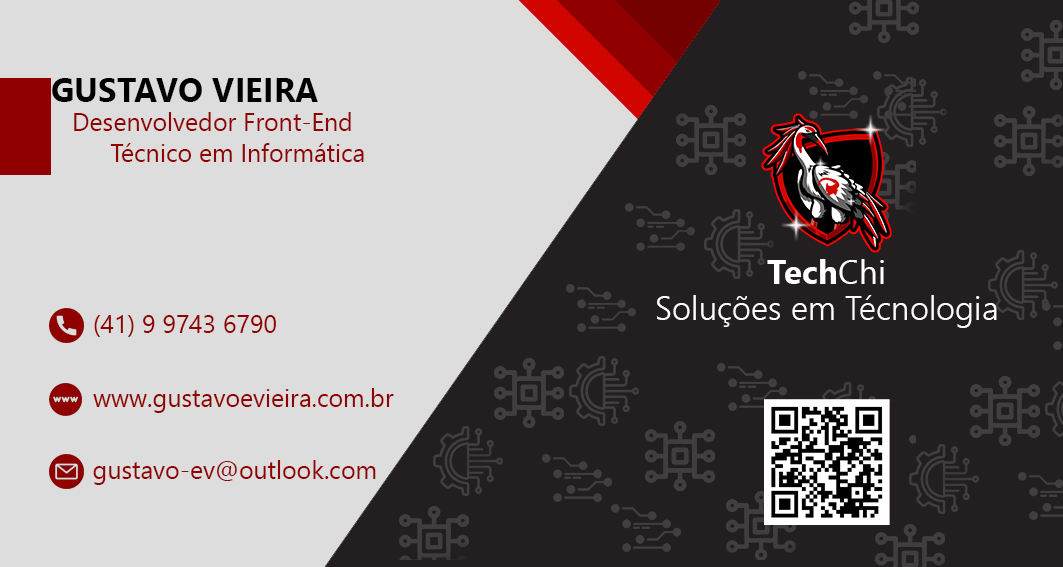
<style>
.page{position:relative;width:1063px;height:567px;background:#dddddd}
.page>*{position:absolute;margin:0}
.t1{font:33.3px "SegoeUI-Bold";color:#000000}
.t2{font:25px "SegoeUI";color:#910000}
.t3{font:33.3px "SegoeUI-Bold";color:#ffffff}
.t4{font:33.3px "SegoeUI";color:#ffffff}
.t5{font:33.3px "SegoeUI-Semilight";color:#ffffff}
</style>
<div class="page">
<p class="t1" style="left:52px;top:78px;width:266px;height:24px">GUSTAVO VIEIRA</p>
<p class="t2" style="left:74px;top:112px;width:277px;height:19px">Desenvolvedor Front-End</p>
<p class="t2" style="left:110px;top:143px;width:254px;height:19px">Técnico em Informática</p>
<p class="t3" style="left:767px;top:259px;width:117px;height:25px">Tech<span class="t4">Chi</span></p>
<p class="t5" style="left:657px;top:295px;width:340px;height:33px">Soluções em Técnologia</p>
<p class="t2" style="left:94px;top:315px;width:182px;height:22px">(41) 9 9743 6790</p>
<p class="t2" style="left:93px;top:388px;width:301px;height:25px">www.gustavoevieira.com.br</p>
<p class="t2" style="left:93px;top:460px;width:283px;height:25px">gustavo-ev@outlook.com</p>
</div>
